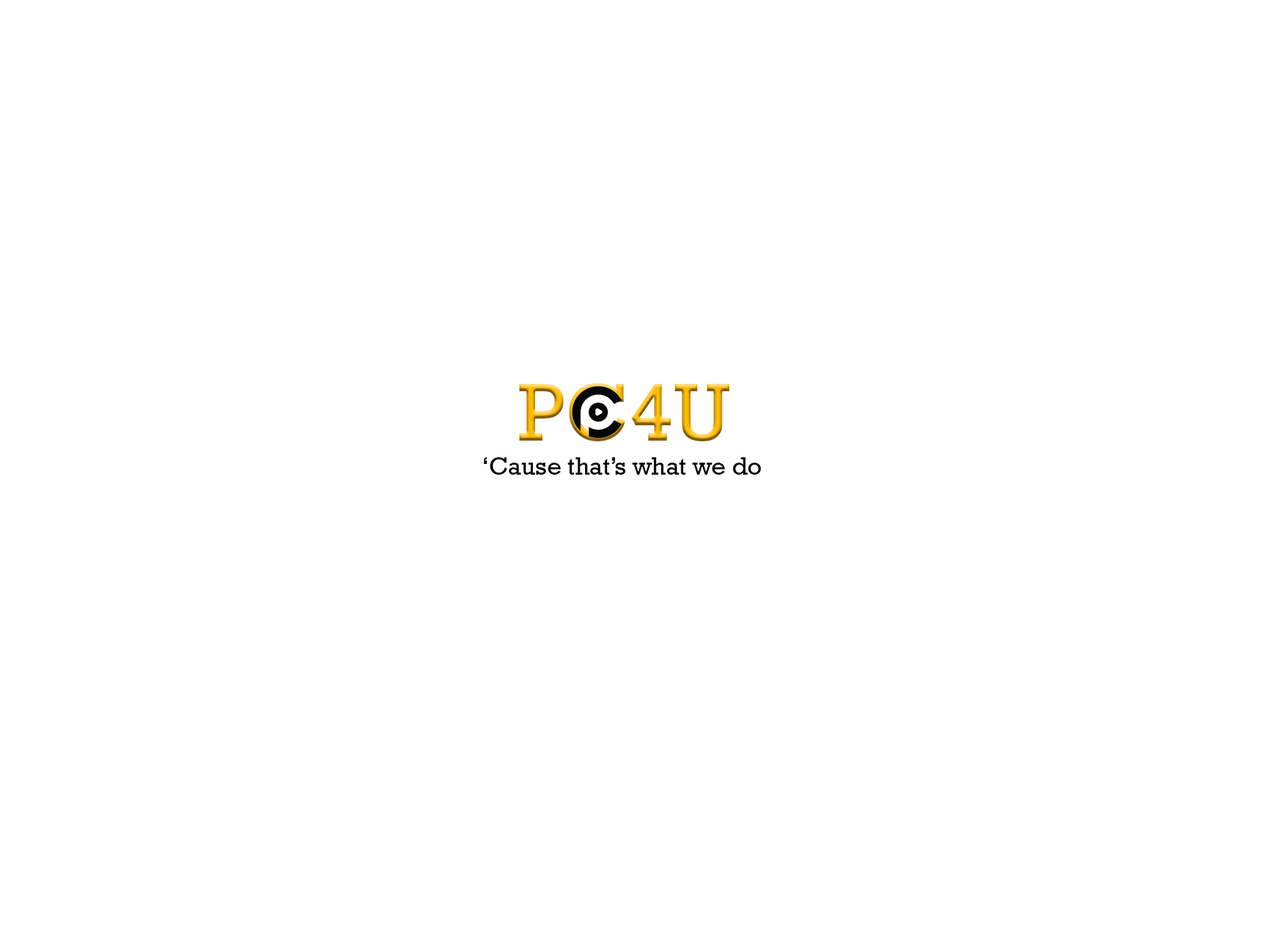
<style>
.page{position:relative;width:1261px;height:946px;background:#ffffff}
.page>*{position:absolute;margin:0}
.t1{font:83.4px "Rockwell"}
.t2{font:25px "Rockwell";color:#000000}
</style>
<div class="page">
<p class="t1" style="left:519px;top:383px;width:211px;height:58px">PC4U</p>
<p class="t2" style="left:484px;top:457px;width:277px;height:17px">‘Cause that’s what we do</p>
</div>
